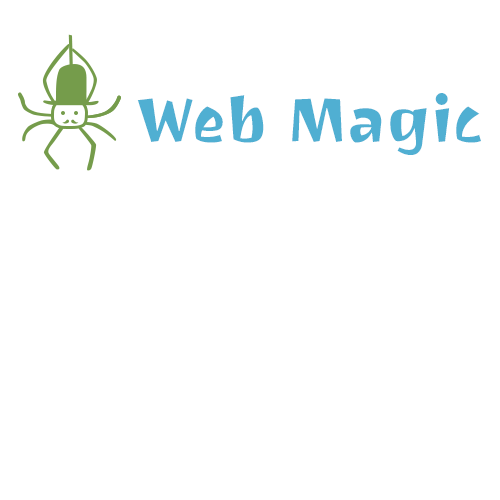
<style>
.page{position:relative;width:500px;height:500px;background:#ffffff}
.page>*{position:absolute;margin:0}
.t1{font:64px "JotiOne-Regular";color:#50afd2}
</style>
<div class="page">
<p class="t1" style="left:137px;top:93px;width:344px;height:62px">Web Magic</p>
</div>
